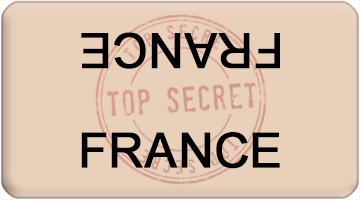
<style>
.page{position:relative;width:360px;height:200px;background:#e8d0bb}
.page>*{position:absolute;margin:0}
.t1{font:48px "ArialMT";color:#000000;font-weight:bold}
</style>
<div class="page">
<p class="t1" style="left:81px;top:32px;width:199px;height:37px;rotate:180deg">FRANCE</p>
<p class="t1" style="left:81px;top:132px;width:199px;height:37px">FRANCE</p>
</div>
